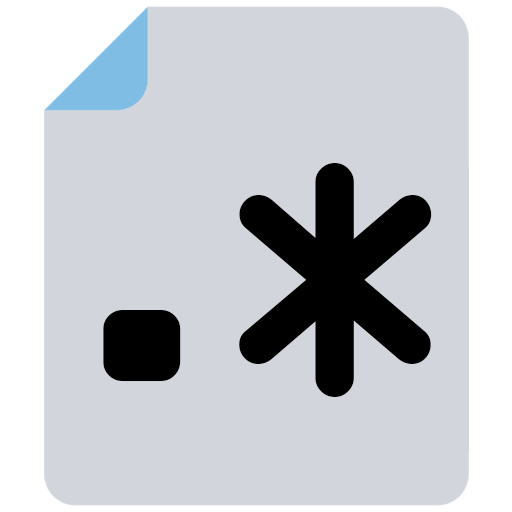
<style>
.page{position:relative;width:512px;height:512px;background:#d2d6dc}
.page>*{position:absolute;margin:0}
.t1{font:463.4px "OCRAExtended";letter-spacing:-0.2em;color:#000000}
</style>
<div class="page">
<p class="t1" style="left:103px;top:163px;width:329px;height:234px">.*</p>
</div>
